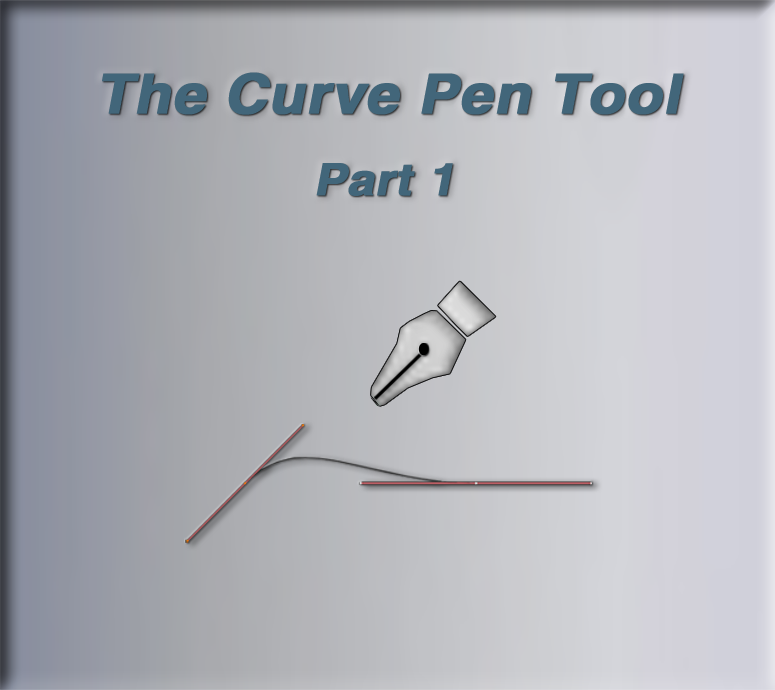
<style>
.page{position:relative;width:775px;height:690px}
.page>*{position:absolute;margin:0}
.t1{font:54.9px "HelveticaLTStd-Bold";color:#42667a;font-weight:bold;font-style:italic;scale:1.08 1}
.t2{font:44.6px "HelveticaLTStd-Bold";color:#42667a;font-weight:bold;font-style:italic;scale:1.08 1}
</style>
<div class="page">
<p class="t1" style="left:102px;top:72px;width:582px;height:43px">The Curve Pen Tool</p>
<p class="t2" style="left:316px;top:163px;width:137px;height:33px">Part 1</p>
</div>
